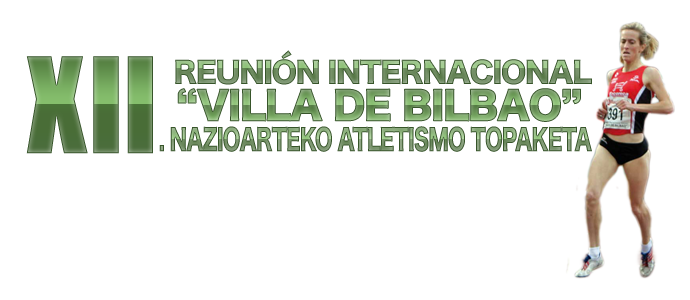
<style>
.page{position:relative;width:690px;height:300px;background:#ffffff}
.page>*{position:absolute;margin:0}
.t1{font:28.8px "HiraKakuStd-W8";letter-spacing:-0.05em}
.t2{font:144px "JCHEadA"}
.t3{font:37.4px "HiraKakuStd-W8";letter-spacing:-0.05em;font-weight:bold}
.t4{font:28.8px "HiraKakuStd-W8";letter-spacing:-0.05em;scale:0.7 1}
</style>
<div class="page">
<p class="t1" style="left:175px;top:50px;width:417px;height:35px">REUNIÓN INTERNACIONAL</p>
<p class="t2" style="left:26px;top:56px;width:127px;height:98px">XII</p>
<p class="t3" style="left:177px;top:88px;width:404px;height:34px">“VILLA DE BILBAO”</p>
<p class="t4" style="left:159px;top:126px;width:433px;height:26px">. NAZIOARTEKO ATLETISMO TOPAKETA</p>
</div>
